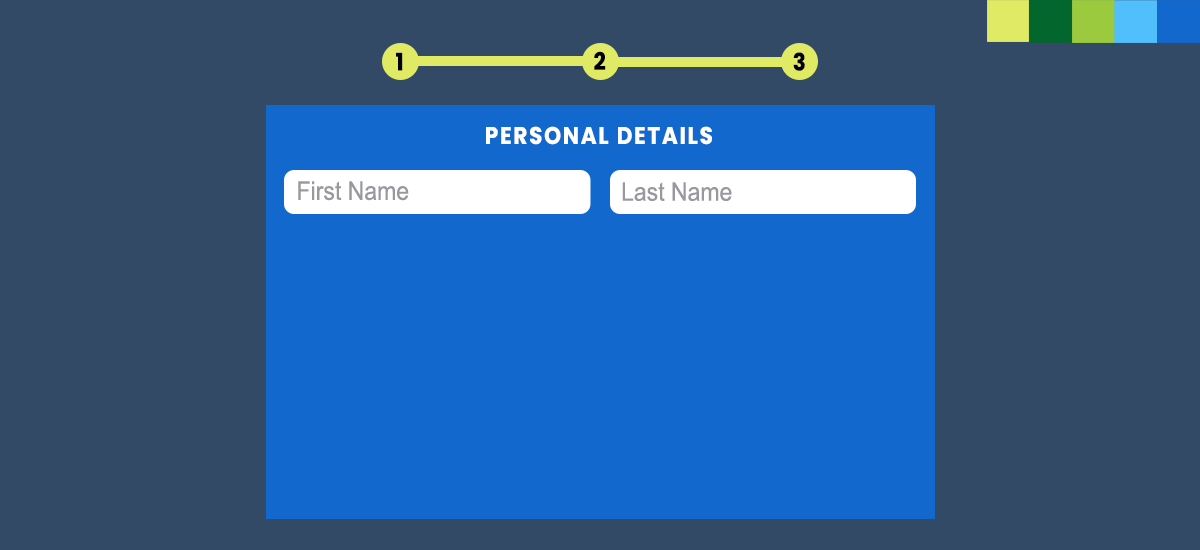
<style>
.page{position:relative;width:1200px;height:550px;background:#334a66}
.page>*{position:absolute;margin:0}
.t1{font:24px "Poppins-Bold";letter-spacing:0.08em;color:#000000;scale:0.9 1}
.t2{font:24px "Poppins-Bold";letter-spacing:0.08em;color:#ffffff;scale:0.9 1}
.t3{font:25.6px "ArialMT";color:#98999e;scale:0.9 1}
</style>
<div class="page">
<p class="t1" style="left:396px;top:52px;width:7px;height:19px">1</p>
<p class="t1" style="left:594px;top:51px;width:12px;height:19px">2</p>
<p class="t1" style="left:793px;top:52px;width:12px;height:19px">3</p>
<p class="t2" style="left:486px;top:126px;width:226px;height:19px">PERSONAL DETAILS</p>
<p class="t3" style="left:298px;top:181px;width:111px;height:20px">First Name</p>
<p class="t3" style="left:622px;top:182px;width:110px;height:19px">Last Name</p>
</div>
